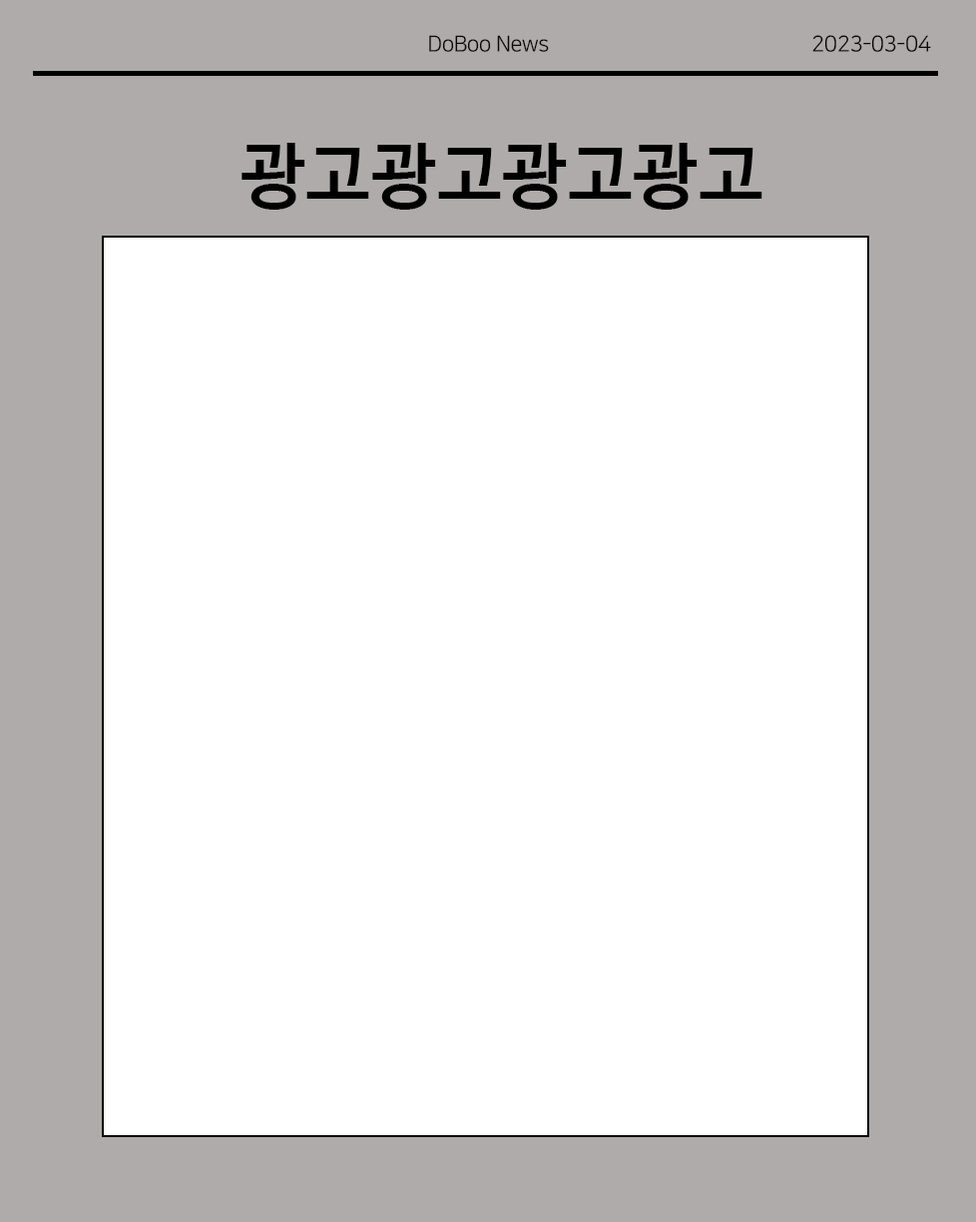
<style>
.page{position:relative;width:976px;height:1222px;background:#ffffff}
.page>*{position:absolute;margin:0}
.t1{font:22px "NanumSquareR";letter-spacing:-0.02em;color:#090907}
.t2{font:71.8px "HancomGothicBold";letter-spacing:-0.02em;color:#000000}
</style>
<div class="page">
<p class="t1" style="left:429px;top:35px;width:120px;height:17px">DoBoo News</p>
<p class="t1" style="left:812px;top:35px;width:119px;height:17px">2023-03-04</p>
<p class="t2" style="left:242px;top:143px;width:521px;height:67px">광고광고광고광고</p>
</div>
